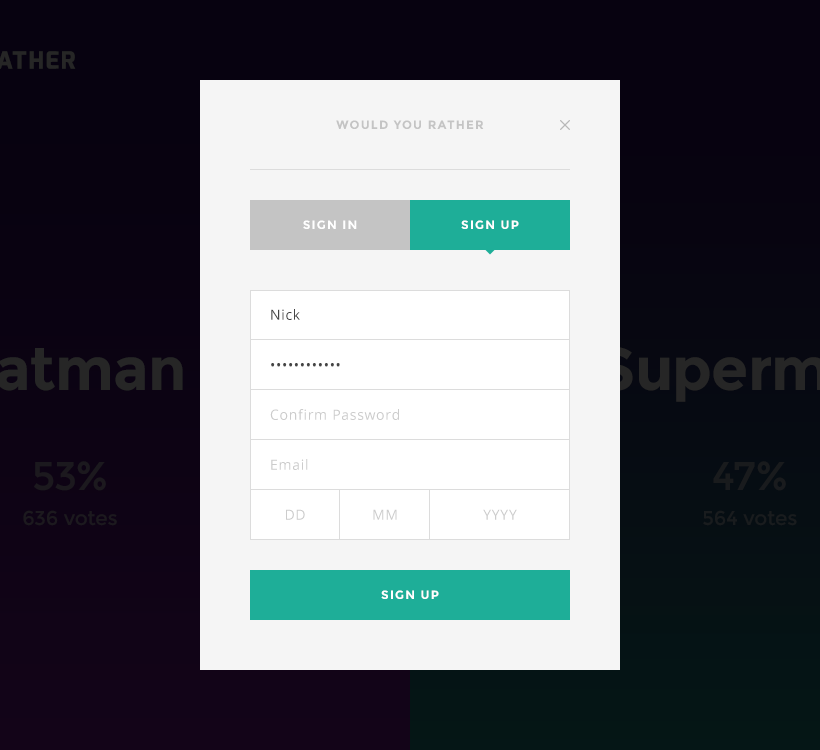
<style>
.page{position:relative;width:820px;height:750px;background:#f5f5f5}
.page>*{position:absolute;margin:0}
.t1{font:12px "Montserrat-Bold";letter-spacing:0.1em;color:#c4c4c4;text-transform:uppercase}
.t2{font:12px "Montserrat-Bold";letter-spacing:0.1em;color:#ffffff;text-transform:uppercase}
.t3{font:14px "OpenSans";letter-spacing:0.05em;color:#444444}
.t4{font:14px "OpenSans";letter-spacing:0.05em;color:#cccccc}
</style>
<div class="page">
<p class="t1" style="left:336px;top:120px;width:148px;height:9px">WOULD YOU RATHER</p>
<p class="t2" style="left:303px;top:220px;width:54px;height:9px">SIGN IN</p>
<p class="t2" style="left:461px;top:220px;width:58px;height:9px">SIGN UP</p>
<p class="t3" style="left:271px;top:309px;width:29px;height:11px">Nick</p>
<p class="t3" style="left:271px;top:363px;width:69px;height:4px">••••••••••••</p>
<p class="t4" style="left:270px;top:409px;width:129px;height:11px">Confirm Password</p>
<p class="t4" style="left:271px;top:459px;width:37px;height:11px">Email</p>
<p class="t4" style="left:286px;top:509px;width:19px;height:11px">DD</p>
<p class="t4" style="left:373px;top:509px;width:24px;height:11px">MM</p>
<p class="t4" style="left:483px;top:509px;width:34px;height:11px">YYYY</p>
<p class="t2" style="left:381px;top:590px;width:58px;height:9px">SIGN UP</p>
</div>
